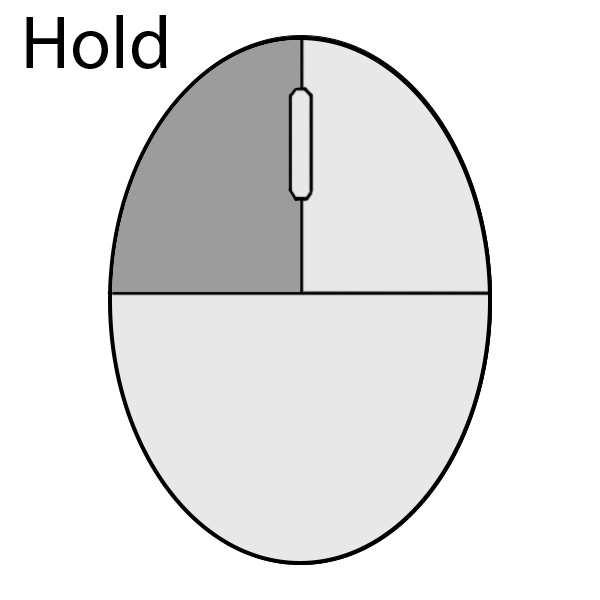
<style>
.page{position:relative;width:600px;height:600px;background:#ffffff}
.page>*{position:absolute;margin:0}
.t1{font:75px "MyriadPro-Regular";color:#000000}
</style>
<div class="page">
<p class="t1" style="left:26px;top:15px;width:141px;height:54px">Hold</p>
</div>
